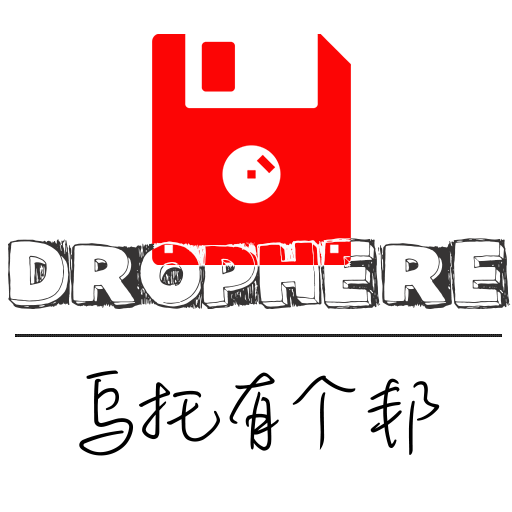
<style>
.page{position:relative;width:512px;height:512px;background:#ffffff}
.page>*{position:absolute;margin:0}
.t1{font:105.1px "DatBox";color:#363434}
.t2{font:105.1px "MLingWaiMedium-TC";color:#000000}
</style>
<div class="page">
<p class="t1" style="left:8px;top:238px;width:503px;height:71px">DropHere</p>
<p class="t2" style="left:79px;top:370px;width:361px;height:86px">乌托有个邦</p>
</div>
